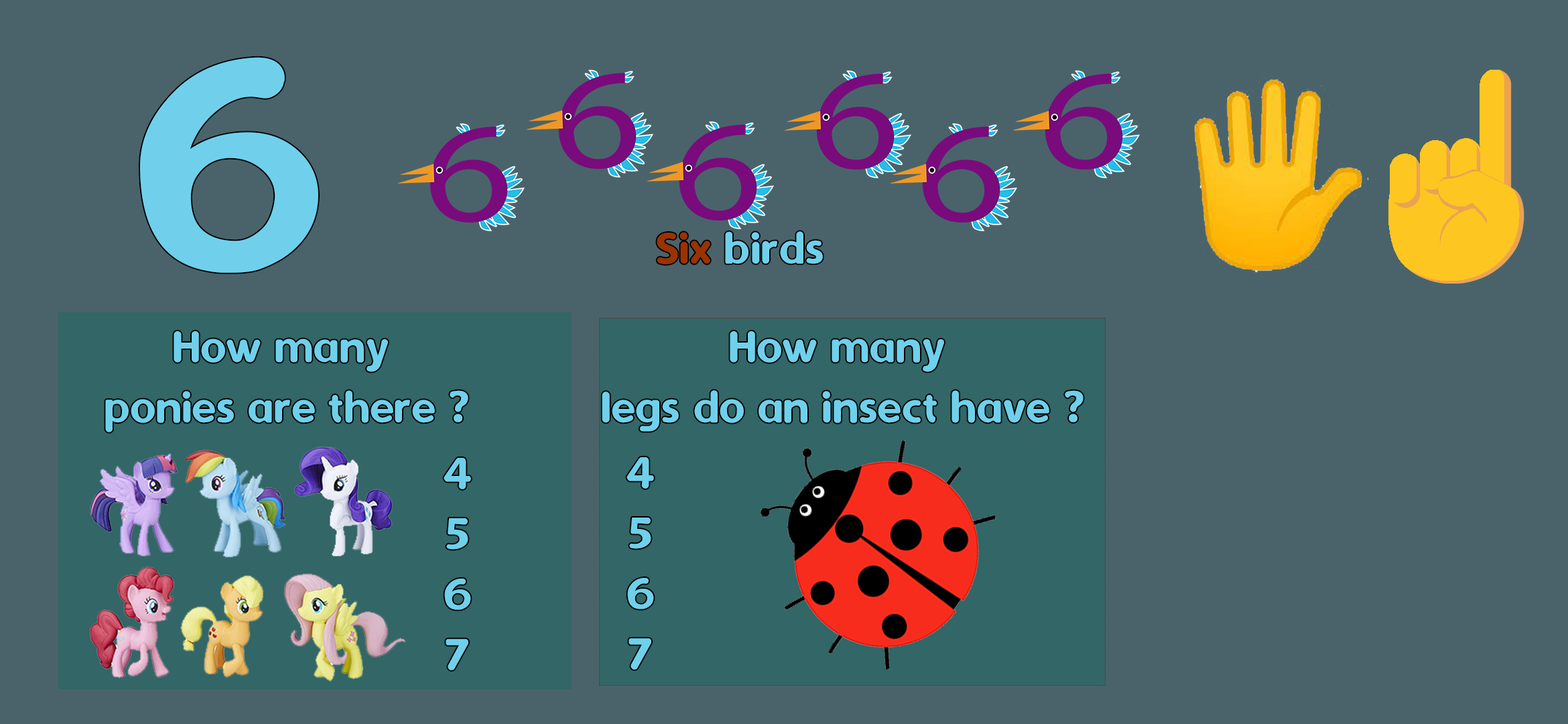
<style>
.page{position:relative;width:1568px;height:724px;background:#4a636b}
.page>*{position:absolute;margin:0}
.t1{font:345.7px "Dyuthi";color:#70d0eb}
.t2{font:50.3px "Dyuthi";color:#70d0eb}
.t3{font:50.3px "Dyuthi";color:#993300}
</style>
<div class="page">
<p class="t1" style="left:140px;top:57px;width:178px;height:216px">6</p>
<p class="t2" style="left:657px;top:231px;width:166px;height:34px"><span class="t3">Six </span>birds</p>
<p class="t2" style="left:105px;top:331px;width:363px;height:101px;text-align:center">How many <br>ponies are there ?</p>
<p class="t2" style="left:602px;top:331px;width:482px;height:101px;text-align:center">How many <br>legs do an insect have ?</p>
<p class="t2" style="left:444px;top:458px;width:27px;height:212px;text-align:center">4<br>5<br>6<br>7</p>
<p class="t2" style="left:627px;top:457px;width:27px;height:212px;text-align:center">4<br>5<br>6<br>7</p>
</div>
